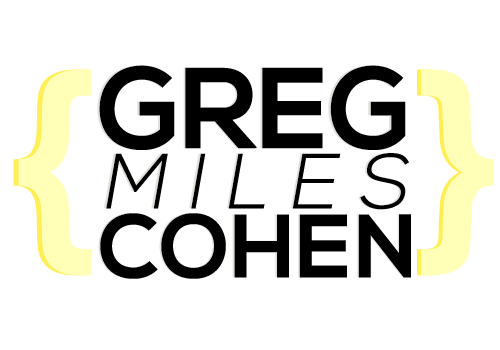
<style>
.page{position:relative;width:500px;height:350px;background:#ffffff}
.page>*{position:absolute;margin:0}
.t1{font:114.6px "NexaBold";color:#dfe2db}
.t2{font:114.6px "NexaBold";color:#000000}
.t3{font:219.2px "CenturyGothic-Bold";color:#fff056}
.t4{font:219.2px "CenturyGothic-Bold";color:#ffffb8}
.t5{font:77.7px "NexaLight";color:#dfe2db;font-style:italic}
.t6{font:77.7px "NexaLight";color:#000000;font-style:italic}
.t7{font:89.7px "NexaBold";color:#dfe2db}
.t8{font:89.7px "NexaBold";color:#000000}
</style>
<div class="page">
<p class="t1" style="left:97px;top:65px;width:306px;height:85px">GREG</p>
<p class="t2" style="left:99px;top:65px;width:307px;height:85px">GREG</p>
<p class="t3" style="left:13px;top:69px;width:74px;height:207px">{</p>
<p class="t4" style="left:18px;top:69px;width:74px;height:207px">{</p>
<p class="t3" style="left:417px;top:69px;width:73px;height:207px">}</p>
<p class="t4" style="left:421px;top:69px;width:73px;height:207px">}</p>
<p class="t5" style="left:104px;top:152px;width:303px;height:57px">M I L E S</p>
<p class="t6" style="left:106px;top:153px;width:303px;height:57px">M I L E S</p>
<p class="t7" style="left:98px;top:213px;width:312px;height:66px">COHEN</p>
<p class="t8" style="left:100px;top:213px;width:311px;height:66px">COHEN</p>
</div>
